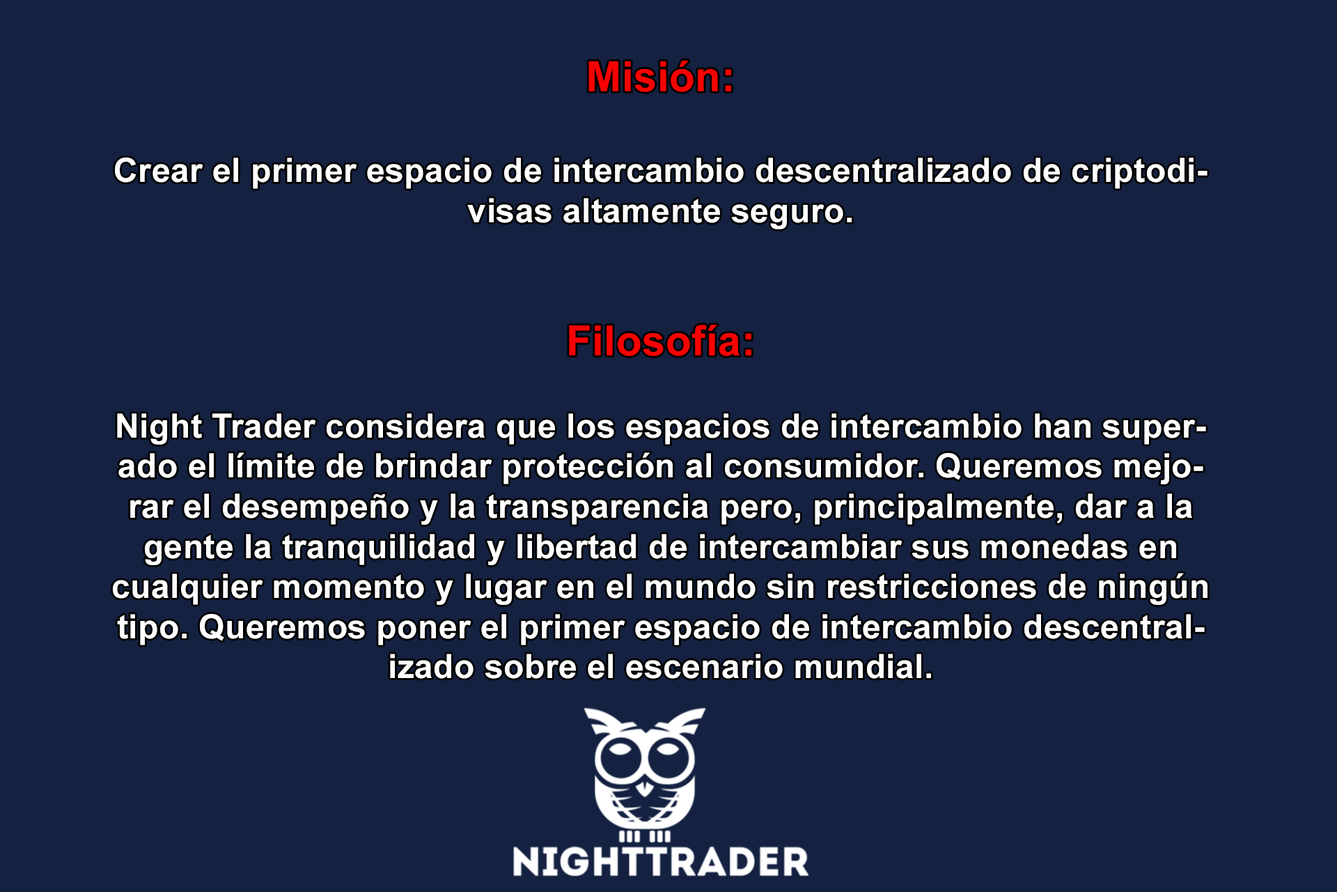
<style>
.page{position:relative;width:1337px;height:892px;background:#142141}
.page>*{position:absolute;margin:0}
.t1{font:33.4px "Arial-BoldMT";letter-spacing:0.01em;color:#ffffff}
.t2{font:41.8px "Arial-BoldMT";letter-spacing:0.01em;color:#f70202}
</style>
<div class="page">
<p class="t1" style="left:113px;top:61px;width:1095px;height:617px;text-align:center"><span class="t2">Misión:<br><br></span>Crear el primer espacio de intercambio descentralizado de criptodivisas altamente seguro.<br><br><br><span class="t2">Filosofía:<br><br></span>Night Trader considera que los espacios de intercambio han superado el límite de brindar protección al consumidor. Queremos mejorar el desempeño y la transparencia pero, principalmente, dar a la gente la tranquilidad y libertad de intercambiar sus monedas en cualquier momento y lugar en el mundo sin restricciones de ningún tipo. Queremos poner el primer espacio de intercambio descentralizado sobre el escenario mundial.</p>
</div>
